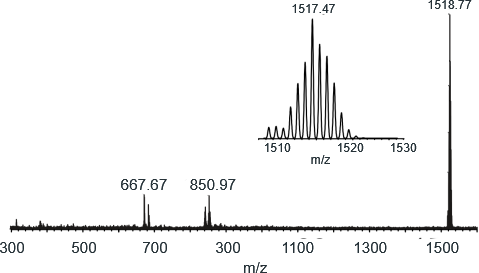
<style>
.page{position:relative;width:479px;height:273px;background:#ffffff}
.page>*{position:absolute;margin:0}
.t1{font:12.2px "ArialMT";color:#263238}
.t2{font:15.3px "ArialMT";color:#263238}
</style>
<div class="page">
<p class="t1" style="left:292px;top:4px;width:43px;height:9px">1517.47</p>
<p class="t1" style="left:428px;top:0px;width:44px;height:9px">1518.77</p>
<p class="t1" style="left:265px;top:143px;width:26px;height:9px">1510</p>
<p class="t1" style="left:338px;top:143px;width:26px;height:9px">1520</p>
<p class="t1" style="left:391px;top:143px;width:26px;height:9px">1530</p>
<p class="t1" style="left:311px;top:155px;width:19px;height:9px">m/z</p>
<p class="t2" style="left:121px;top:179px;width:46px;height:11px">667.67</p>
<p class="t2" style="left:190px;top:179px;width:46px;height:11px">850.97</p>
<p class="t2" style="left:0px;top:242px;width:24px;height:11px">300</p>
<p class="t2" style="left:72px;top:242px;width:24px;height:11px">500</p>
<p class="t2" style="left:143px;top:242px;width:24px;height:11px">700</p>
<p class="t2" style="left:216px;top:242px;width:24px;height:11px">300</p>
<p class="t2" style="left:283px;top:242px;width:31px;height:11px">1100</p>
<p class="t2" style="left:355px;top:242px;width:32px;height:11px">1300</p>
<p class="t2" style="left:427px;top:242px;width:32px;height:11px">1500</p>
<p class="t2" style="left:244px;top:262px;width:23px;height:11px">m/z</p>
</div>
